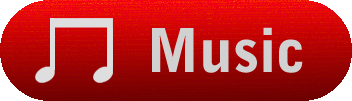
<style>
.page{position:relative;width:352px;height:101px}
.page>*{position:absolute;margin:0}
.t1{font:60px "BellGothicStd-Black";color:#d1d1d1}
</style>
<div class="page">
<p class="t1" style="left:152px;top:27px;width:151px;height:46px">Music</p>
</div>
